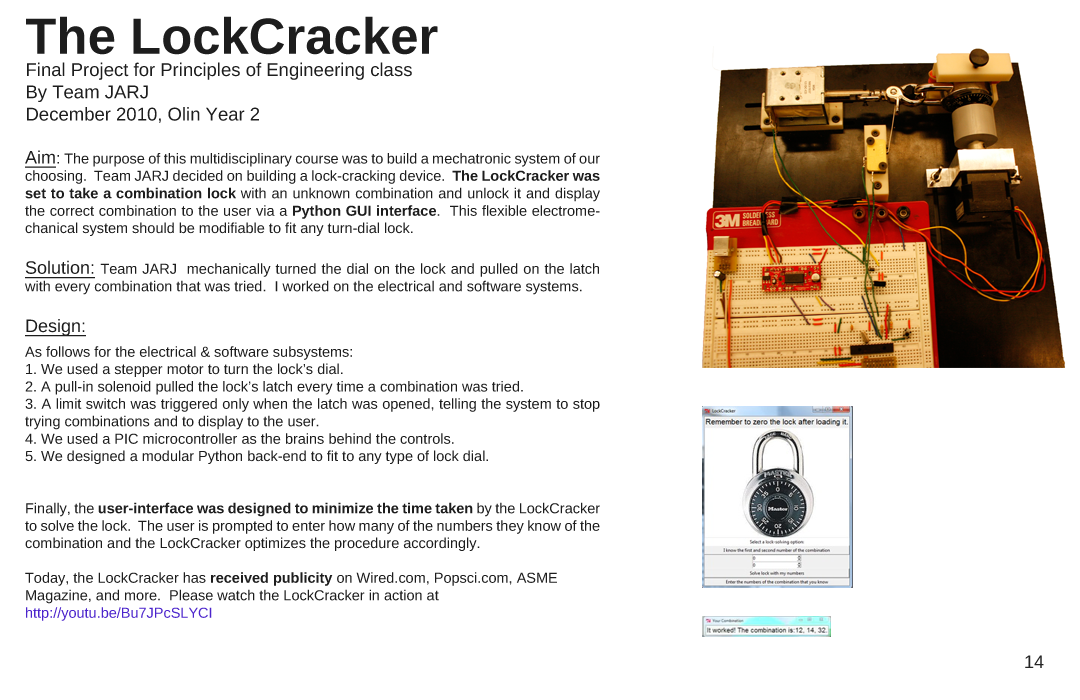
<style>
.page{position:relative;width:1080px;height:700px;background:#ffffff}
.page>*{position:absolute;margin:0}
.t1{font:18.5px "LiberationSans";color:#1d1d1d}
.t2{font:50.9px "LiberationSans-Bold";color:#1d1d1d}
.t3{font:14.5px "LiberationSans";color:#1d1d1d}
.t4{font:18px "LiberationSans";color:#1d1d1d;text-decoration:underline}
.t5{font:16px "LiberationSans";color:#1d1d1d}
.t6{font:14.5px "LiberationSans-Bold";color:#1d1d1d}
.t7{font:14.5px "LiberationSans";color:#4c25cc}
.t8{font:18px "LiberationSans";color:#252525}
</style>
<div class="page">
<p class="t1" style="left:26px;top:16px;width:412px;height:107px;text-align:justify"><span class="t2">The LockCracker<br></span>Final Project for Principles of Engineering class<br>By Team JARJ<br>December 2010, Olin Year 2</p>
<p class="t3" style="left:25px;top:150px;width:575px;height:471px;text-align:justify"><span class="t4">Aim</span><span class="t5">: </span>The purpose of this multidisciplinary course was to build a mechatronic system of our choosing.  Team JARJ decided on building a lock-cracking device.  <span class="t6">The LockCracker was set to take a combination lock</span> with an unknown combination and unlock it and display the correct combination to the user via a <span class="t6">Python GUI interface</span>.  This flexible electromechanical system should be modifiable to fit any turn-dial lock.<br><br><span class="t4">Solution: </span>Team JARJ  mechanically turned the dial on the lock and pulled on the latch with every combination that was tried.  I worked on the electrical and software systems.<br><br><span class="t4">Design: <br><br></span>As follows for the electrical &amp; software subsystems:<br>1. We used a stepper motor to turn the lock’s dial.<br>2. A pull-in solenoid pulled the lock’s latch every time a combination was tried. <br>3. A limit switch was triggered only when the latch was opened, telling the system to stop trying combinations and to display to the user.  <br>4. We used a PIC microcontroller as the brains behind the controls.  <br>5. We designed a modular Python back-end to fit to any type of lock dial.<br><br><br>Finally, the <span class="t6">user-interface was designed to minimize the time taken</span> by the LockCracker to solve the lock.  The user is prompted to enter how many of the numbers they know of the combination and the LockCracker optimizes the procedure accordingly.   <br><br>Today, the LockCracker has <span class="t6">received publicity</span> on Wired.com, Popsci.com, ASME Magazine, and more.  Please watch the LockCracker in action at <span class="t7">http://youtu.be/Bu7JPcSLYCI</span></p>
<p class="t8" style="left:1025px;top:655px;width:19px;height:13px">14</p>
</div>
